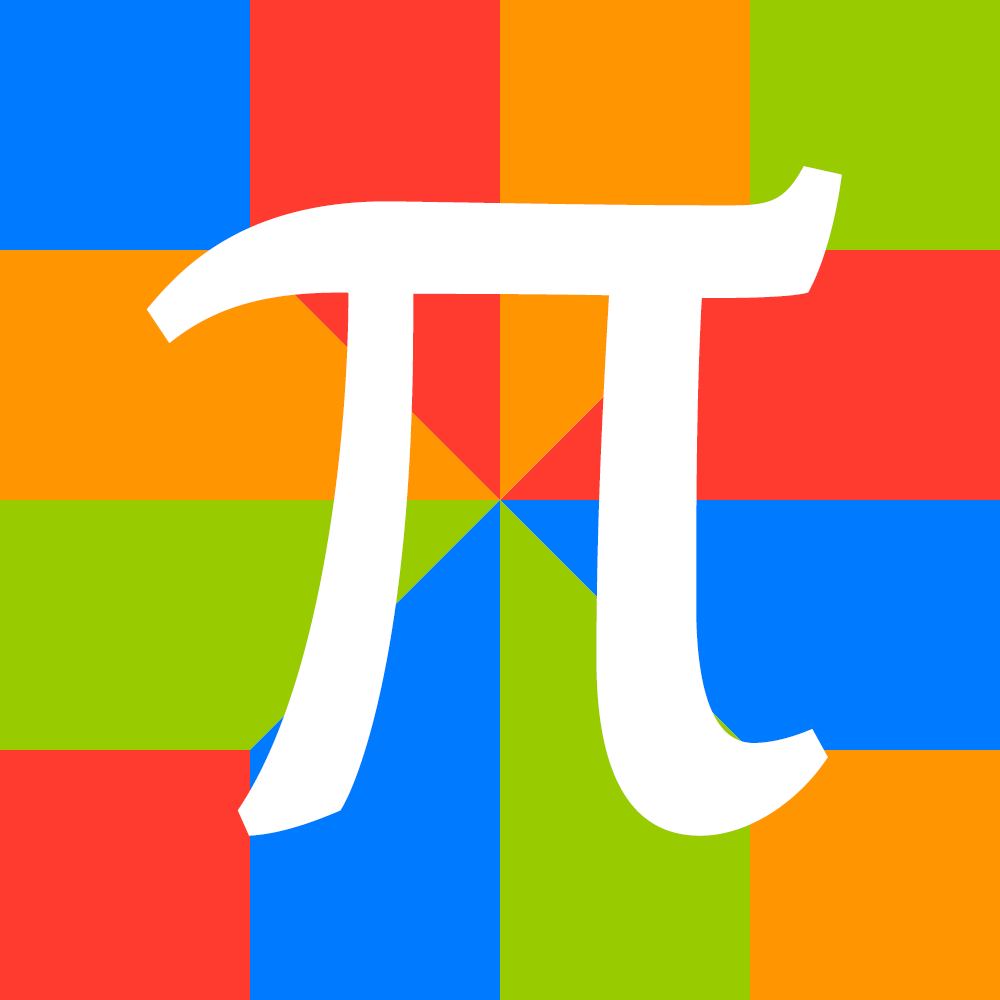
<style>
.page{position:relative;width:1000px;height:1000px;background:#007aff}
.page>*{position:absolute;margin:0}
.t1{font:1400px "MinionPro-Regular";color:#ffffff}
</style>
<div class="page">
<p class="t1" style="left:146px;top:166px;width:696px;height:670px">π</p>
</div>
